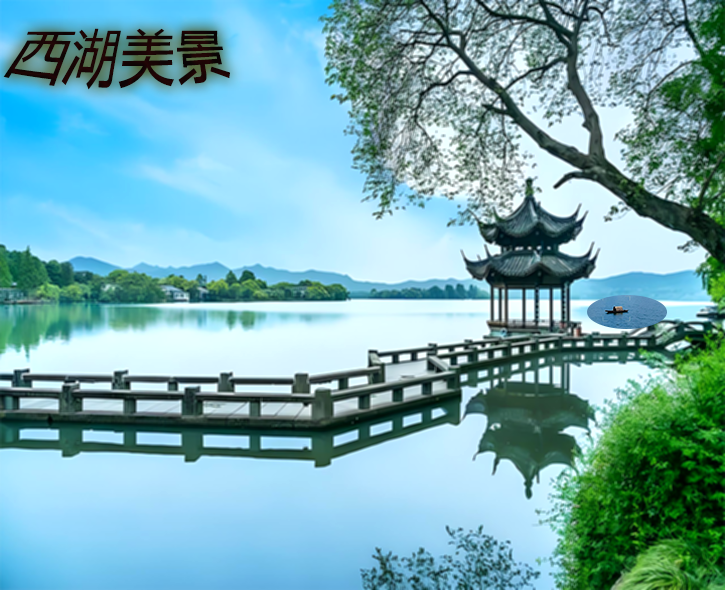
<style>
.page{position:relative;width:725px;height:590px}
.page>*{position:absolute;margin:0}
.t1{font:42.9px "MicrosoftYaHei";letter-spacing:0.002em;color:#040404;font-style:italic;scale:1.14 1}
</style>
<div class="page">
<p class="t1" style="left:3px;top:28px;width:227px;height:62px">西湖美景</p>
</div>
